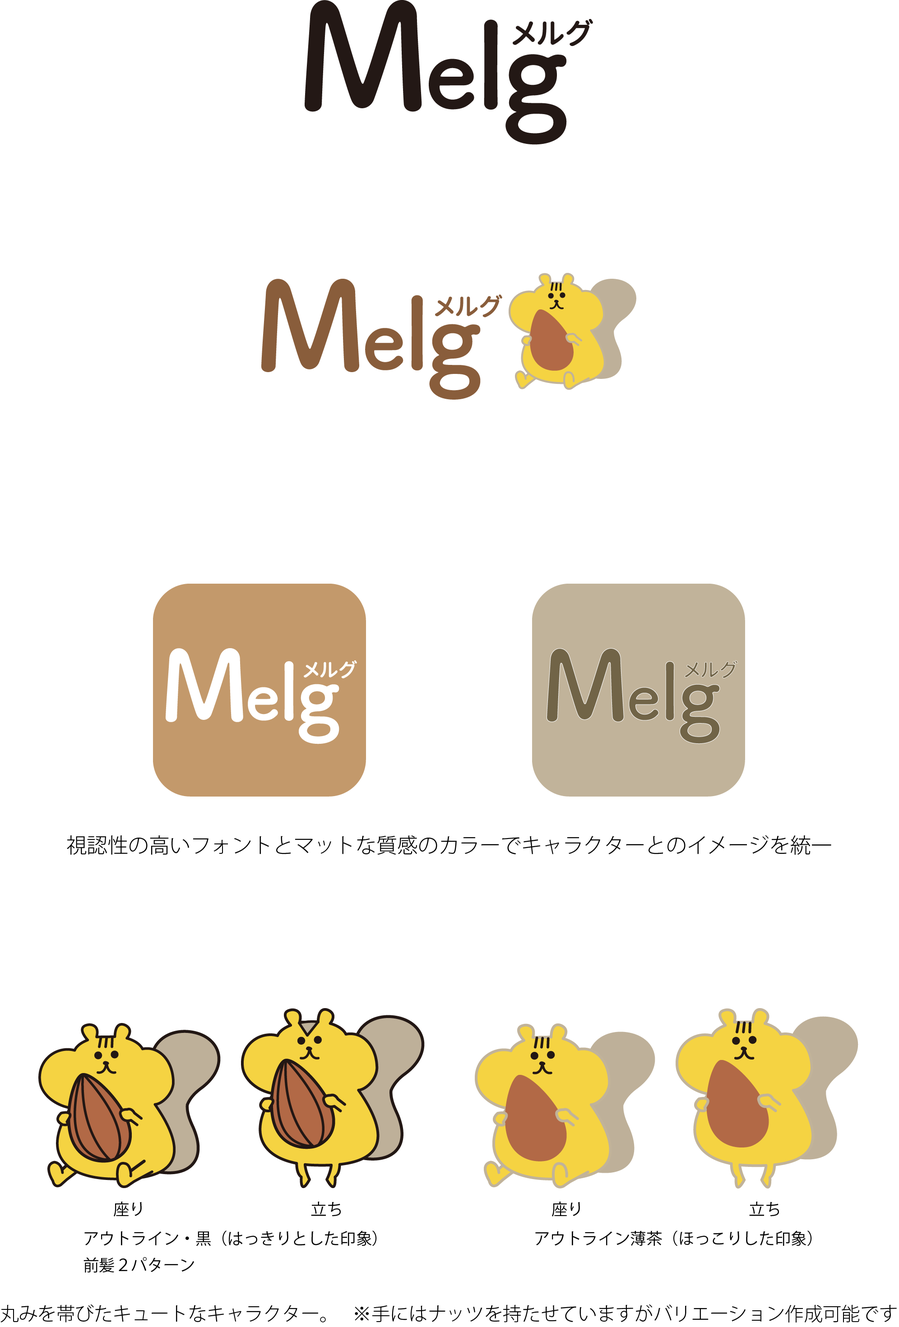
<style>
.page{position:relative;width:899px;height:1327px;background:#ffffff}
.page>*{position:absolute;margin:0}
.t1{font:20.7px "KozGoPro-Light";color:#000000}
.t2{font:16.1px "KozGoPro-Regular";color:#000000}
.t3{font:18.8px "KozGoPro-Light";color:#000000}
</style>
<div class="page">
<p class="t1" style="left:67px;top:835px;width:764px;height:20px">視認性の高いフォントとマットな質感のカラーでキャラクターとのイメージを統一</p>
<p class="t2" style="left:114px;top:1202px;width:28px;height:15px">座り</p>
<p class="t2" style="left:311px;top:1202px;width:30px;height:15px">立ち</p>
<p class="t2" style="left:552px;top:1202px;width:28px;height:15px">座り</p>
<p class="t2" style="left:749px;top:1202px;width:30px;height:15px">立ち</p>
<p class="t2" style="left:84px;top:1231px;width:293px;height:15px">アウトライン・黒（はっきりとした印象）</p>
<p class="t2" style="left:535px;top:1231px;width:276px;height:15px">アウトライン薄茶（ほっこりした印象）</p>
<p class="t2" style="left:83px;top:1257px;width:111px;height:16px">前髪２パターン</p>
<p class="t3" style="left:0px;top:1304px;width:896px;height:19px">丸みを帯びたキュートなキャラクター。 　※手にはナッツを持たせていますがバリエーション作成可能です</p>
</div>
